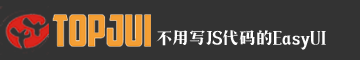
<style>
.page{position:relative;width:360px;height:60px;background:#333333}
.page>*{position:absolute;margin:0}
.t1{font:16.7px "MFYanSong_Noncommercial-Regular";color:#fefefe}
</style>
<div class="page">
<p class="t1" style="left:156px;top:30px;width:170px;height:20px">不用写JS代码的EasyUI</p>
</div>
